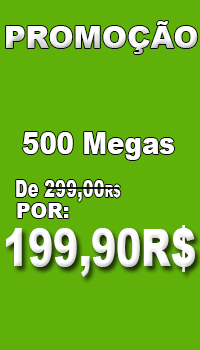
<style>
.page{position:relative;width:200px;height:350px;background:#60b00a}
.page>*{position:absolute;margin:0}
.t1{font:30px "Arial-Black";color:#ffffff}
.t2{font:30.1px "Arial-Black";color:#ffffff;scale:0.86 1}
.t3{font:24px "Arial-Black";color:#ffffff;scale:0.69 1}
.t4{font:16px "Arial-Black";color:#ffffff;scale:0.69 1}
.t5{font:20px "Arial-Black";color:#ffffff}
.t6{font:51.5px "Arial-Black";color:#ffffff;scale:0.73 1}
</style>
<div class="page">
<p class="t1" style="left:6px;top:21px;width:192px;height:33px">PROMOÇÃO</p>
<p class="t2" style="left:22px;top:132px;width:152px;height:28px">500 Megas</p>
<p class="t3" style="left:16px;top:180px;width:105px;height:22px">De 299,00<span class="t4">R$</span></p>
<p class="t5" style="left:17px;top:203px;width:52px;height:15px">POR:</p>
<p class="t6" style="left:6px;top:225px;width:189px;height:52px">199,90R$</p>
</div>
